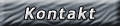
<style>
.page{position:relative;width:120px;height:26px}
.page>*{position:absolute;margin:0}
.t1{font:16px "TrebuchetMS-Bold";letter-spacing:0.1em;color:#e9e9e9;font-weight:bold;font-style:italic}
</style>
<div class="page">
<p class="t1" style="left:24px;top:7px;width:72px;height:13px">Kontakt</p>
</div>
